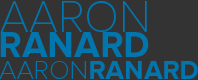
<style>
.page{position:relative;width:198px;height:80px;background:#333333}
.page>*{position:absolute;margin:0}
.t1{font:45.4px "ProximaNovaT-Thin";color:#0075ae}
.t2{font:37px "ProximaNova-Bold";color:#0075ae}
.t3{font:27px "ProximaNova-Bold";color:#0075ae}
.t4{font:27px "ProximaNovaT-Thin";color:#0075ae}
</style>
<div class="page">
<p class="t1" style="left:0px;top:1px;width:147px;height:31px">AARON</p>
<p class="t2" style="left:0px;top:32px;width:149px;height:25px">RANARD</p>
<p class="t3" style="left:0px;top:61px;width:198px;height:18px"><span class="t4">AARON</span>RANARD</p>
</div>
